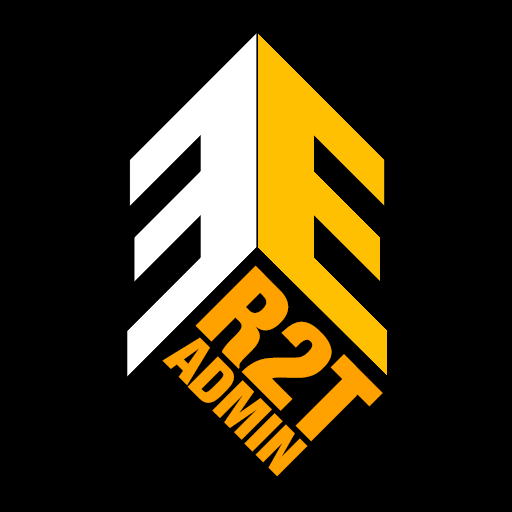
<style>
.page{position:relative;width:512px;height:512px;background:#000000}
.page>*{position:absolute;margin:0}
.t1{font:118.6px "HelveticaNeue-CondensedBlack";color:#ffa200}
.t2{font:60px "HelveticaNeue-CondensedBlack";color:#ffa200}
</style>
<div class="page">
<p class="t1" style="left:195px;top:265px;width:188px;height:177px;rotate:45deg">R2T</p>
<p class="t2" style="left:162px;top:337px;width:146px;height:140px;rotate:45deg">ADMIN</p>
</div>
